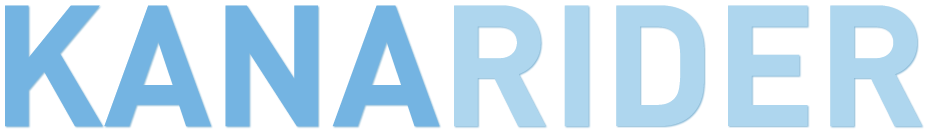
<style>
.page{position:relative;width:937px;height:133px;background:#ffffff}
.page>*{position:absolute;margin:0}
.t1{font:169.3px "DIN-Bold";color:#aed6ee}
.t2{font:169.3px "DIN-Bold";color:#74b4e2}
</style>
<div class="page">
<p class="t1" style="left:5px;top:5px;width:917px;height:122px"><span class="t2">KANA</span>RIDER</p>
</div>
